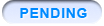
<style>
.page{position:relative;width:104px;height:26px}
.page>*{position:absolute;margin:0}
.t1{font:14px "Arial-BoldMT";letter-spacing:0.05em;color:#008aff}
</style>
<div class="page">
<p class="t1" style="left:20px;top:8px;width:67px;height:10px">PENDING</p>
</div>
